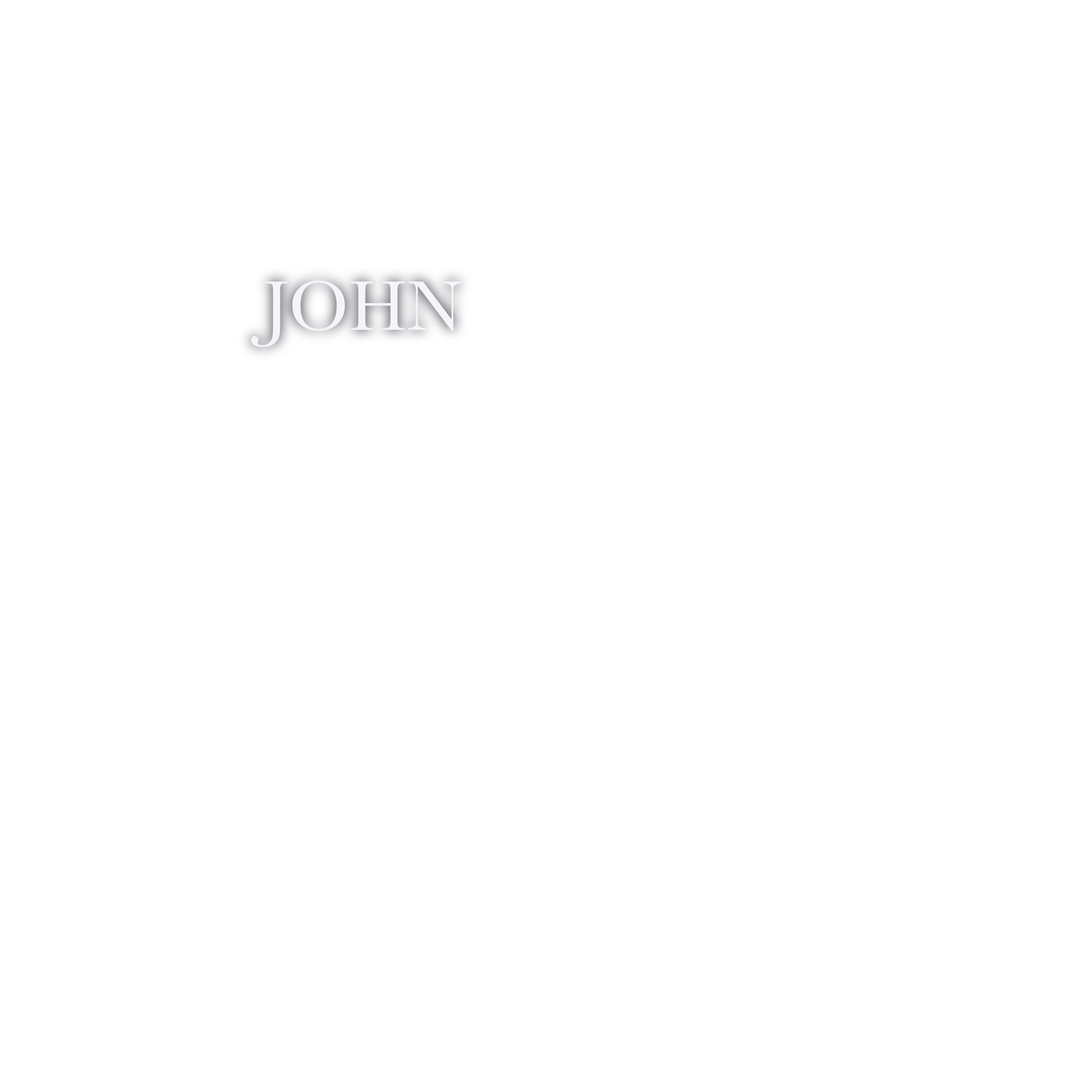
<style>
.page{position:relative;width:1092px;height:1092px;background:#ffffff}
.page>*{position:absolute;margin:0}
.t1{font:72.8px "Baskerville";color:#f5f5f9}
</style>
<div class="page">
<p class="t1" style="left:251px;top:281px;width:210px;height:66px">JOHN</p>
</div>
